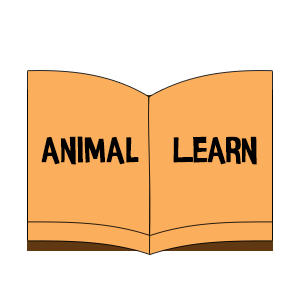
<style>
.page{position:relative;width:300px;height:300px;background:#ffffff}
.page>*{position:absolute;margin:0}
.t1{font:37px "InsideOut";color:#000000}
</style>
<div class="page">
<p class="t1" style="left:41px;top:136px;width:98px;height:29px">animal</p>
<p class="t1" style="left:173px;top:136px;width:84px;height:29px">Learn</p>
</div>
